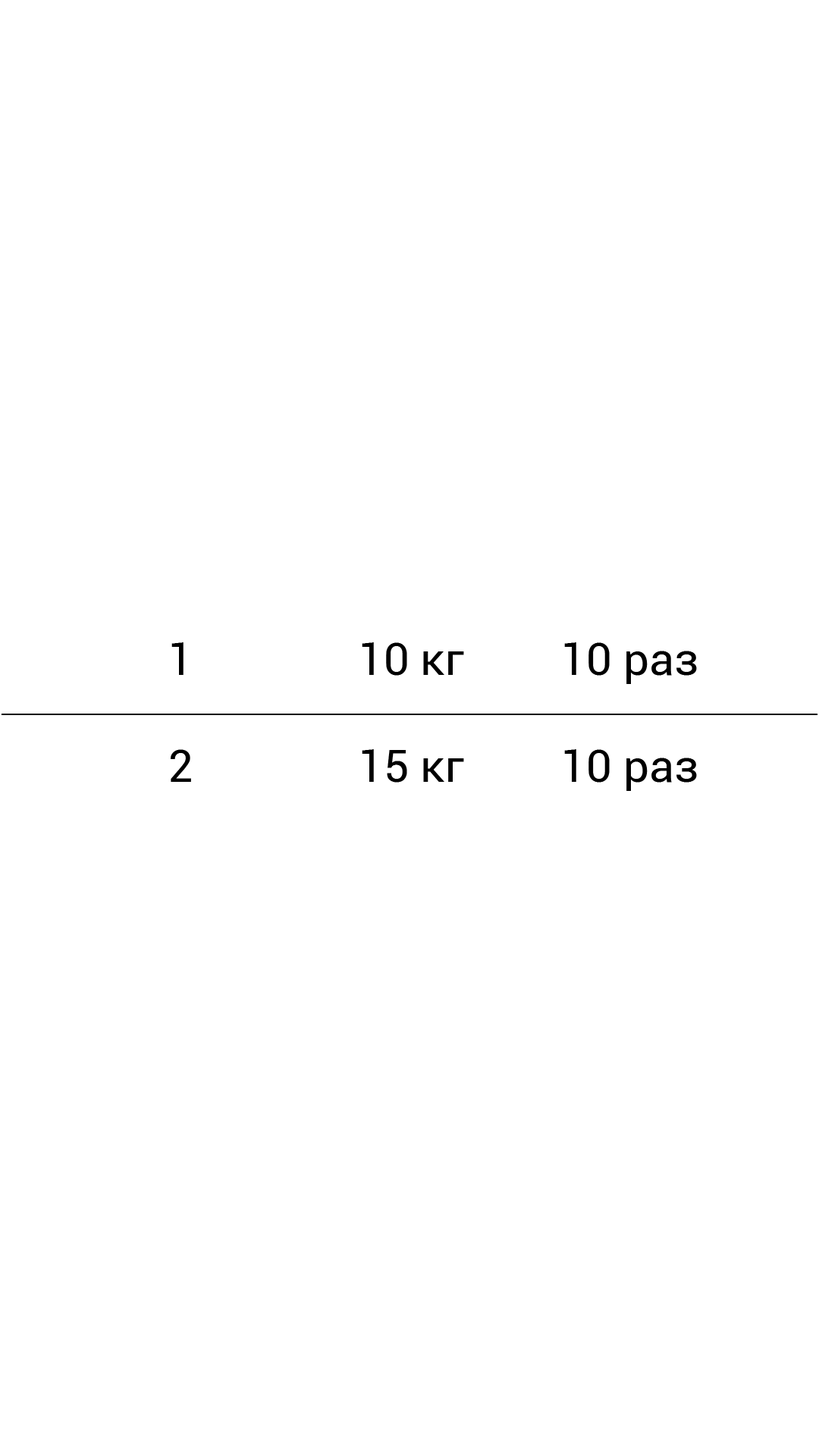
<style>
.page{position:relative;width:819px;height:1456px;background:#ffffff}
.page>*{position:absolute;margin:0}
.t1{font:45.5px "Roboto-Regular";color:#000000}
</style>
<div class="page">
<p class="t1" style="left:171px;top:642px;width:13px;height:33px">1</p>
<p class="t1" style="left:362px;top:642px;width:102px;height:34px">10 кг</p>
<p class="t1" style="left:564px;top:642px;width:133px;height:42px">10 раз</p>
<p class="t1" style="left:171px;top:749px;width:20px;height:33px">2</p>
<p class="t1" style="left:362px;top:749px;width:102px;height:34px">15 кг</p>
<p class="t1" style="left:564px;top:749px;width:133px;height:42px">10 раз</p>
</div>
